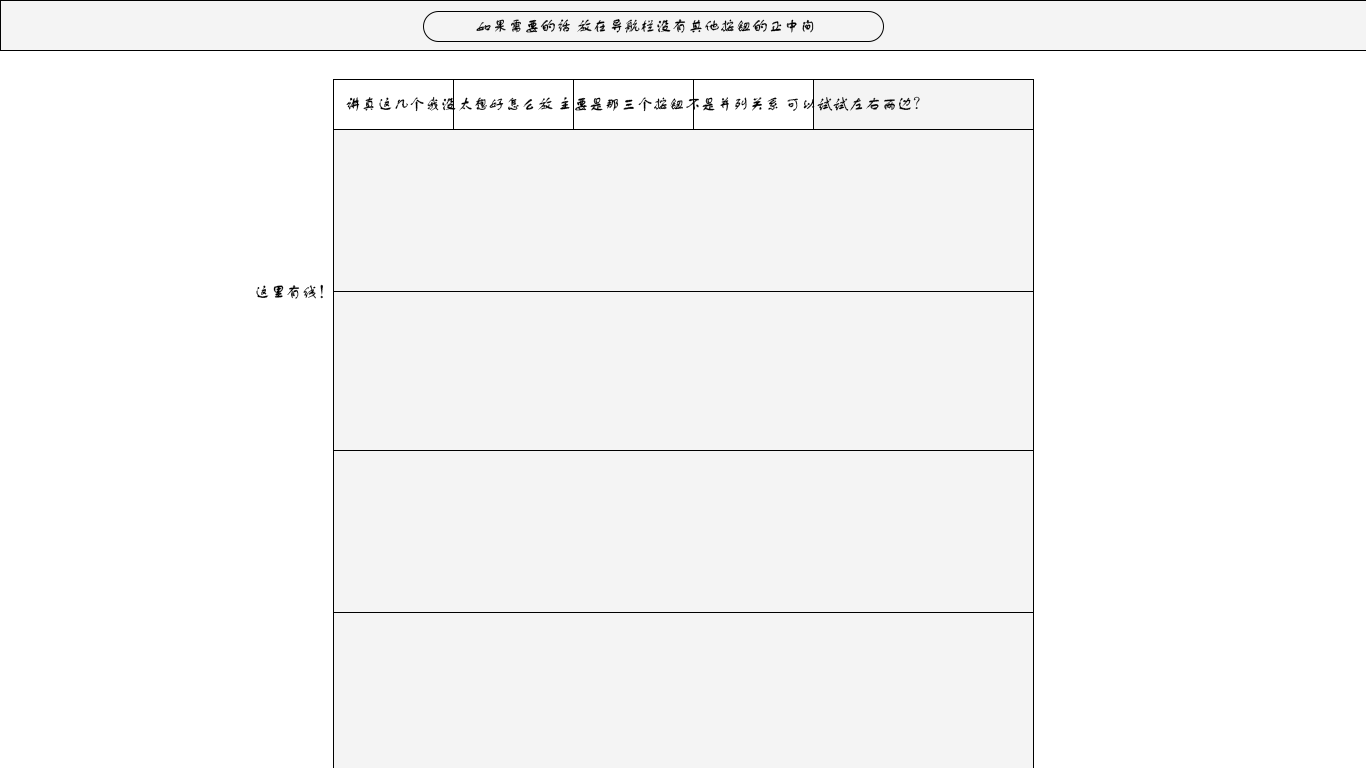
<style>
.page{position:relative;width:1366px;height:768px;background:#ffffff}
.page>*{position:absolute;margin:0}
.t1{font:16px "FZSTK--GBK1-0";color:#000000}
</style>
<div class="page">
<p class="t1" style="left:476px;top:19px;width:338px;height:14px">如果需要的话 放在导航栏没有其他按钮的正中间</p>
<p class="t1" style="left:346px;top:96px;width:574px;height:16px">讲真这几个我没太想好怎么放 主要是那三个按钮不是并列关系 可以试试左右两边？</p>
<p class="t1" style="left:256px;top:284px;width:67px;height:15px">这里有线！</p>
</div>
